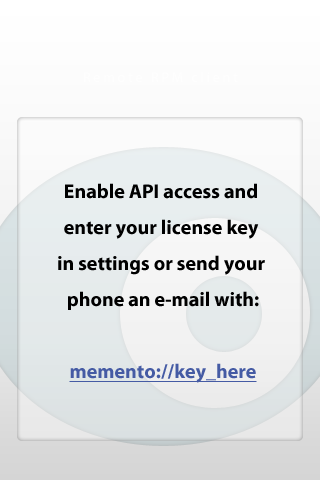
<style>
.page{position:relative;width:320px;height:480px}
.page>*{position:absolute;margin:0}
.t1{font:20px/36px "MyriadPro-Bold";color:#000000}
.t2{font:20px/36px "MyriadPro-Bold";color:#455ba4;text-decoration:underline}
</style>
<div class="page">
<p class="t1" style="left:58px;top:183px;width:207px;height:200px;text-align:center">Enable API access and <br>enter your license key <br>in settings or send your <br>phone an e-mail with:<br><br><span class="t2">memento://key_here</span></p>
</div>
